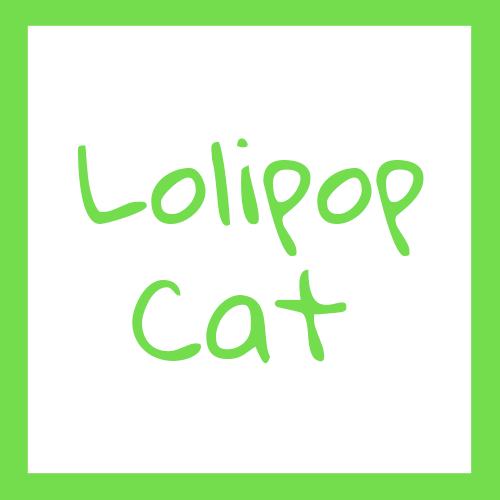
<style>
.page{position:relative;width:500px;height:500px;background:#ffffff}
.page>*{position:absolute;margin:0}
.t1{font:117px/68.3px "GloriaHallelujah";color:#73dd4e}
</style>
<div class="page">
<p class="t1" style="left:78px;top:138px;width:346px;height:226px">Lolipop<br> <br> Cat</p>
</div>
